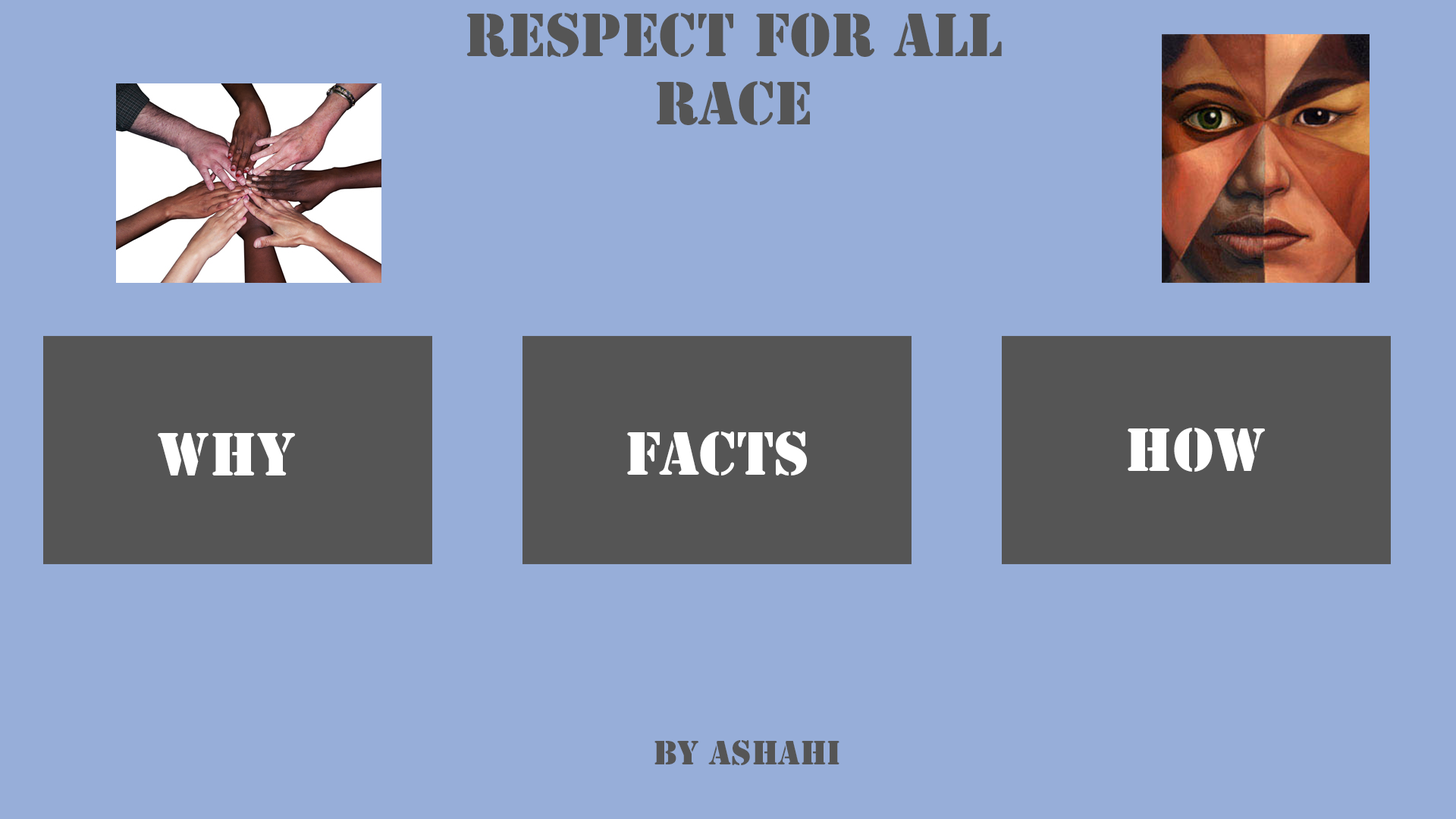
<style>
.page{position:relative;width:1456px;height:819px;background:#97aed9}
.page>*{position:absolute;margin:0}
.t1{font:56.9px "StencilStd";color:#555555}
.t2{font:56.9px "StencilStd";color:#ffffff}
.t3{font:31.6px "StencilStd";color:#555555}
</style>
<div class="page">
<p class="t1" style="left:466px;top:13px;width:536px;height:112px;text-align:center">Respect For All<br>Race</p>
<p class="t2" style="left:158px;top:433px;width:137px;height:42px">Why</p>
<p class="t2" style="left:627px;top:431px;width:180px;height:44px">Facts</p>
<p class="t2" style="left:1128px;top:428px;width:137px;height:44px">How</p>
<p class="t3" style="left:654px;top:740px;width:185px;height:25px">By Ashahi</p>
</div>
